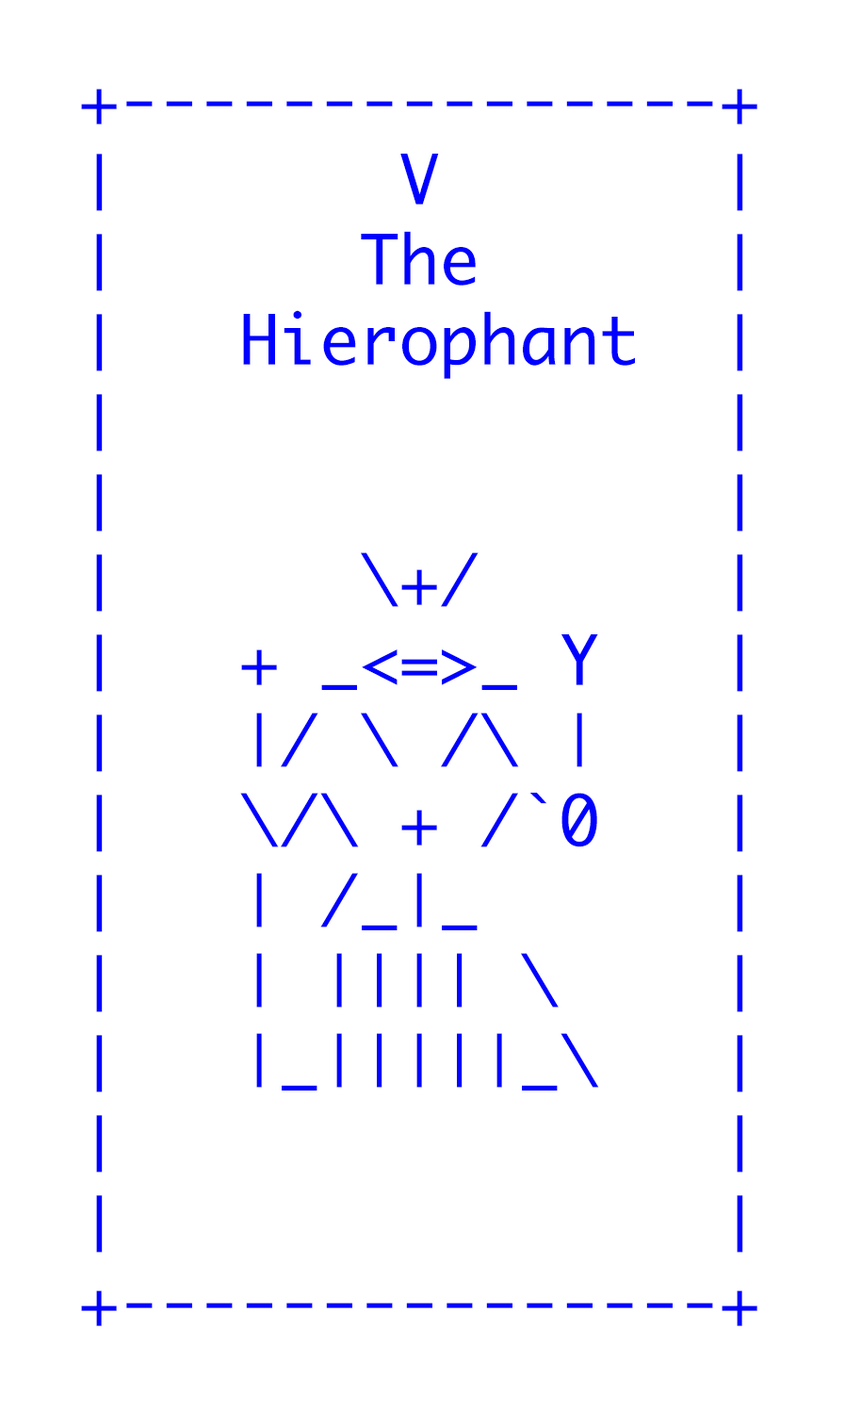
<style>
.page{position:relative;width:845px;height:1411px;background:#ffffff}
.page>*{position:absolute;margin:0}
.t1{font:66.7px "Monaco";color:#0000ff}
</style>
<div class="page">
<p class="t1" style="left:81px;top:89px;width:677px;height:1237px">+---------------+<br>│       V       │<br>│      The      │<br>│   Hierophant  │<br>│               │<br>│               │<br>│      \+/      │ <br>│   + _&lt;=&gt;_ Y   │ <br>│   |/ \ /\ |   │ <br>│   \/\ + /`0   │  <br>│   | /_|_      │<br>│   | |||| \    │ <br>│   |_|||||_\   │ <br>│               │<br>│               │<br>+---------------+</p>
</div>
